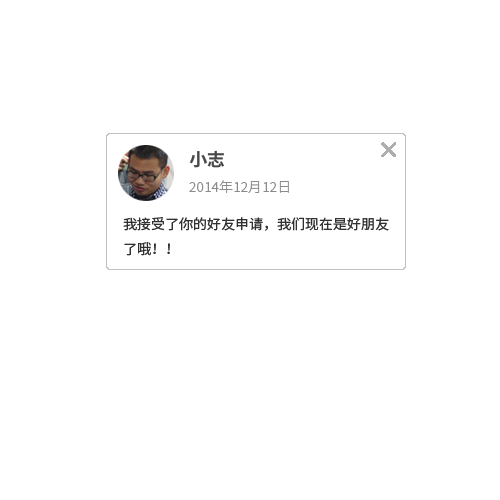
<style>
.page{position:relative;width:500px;height:500px;background:#ffffff}
.page>*{position:absolute;margin:0}
.t1{font:17.6px "NotoSansCJKsc-Bold";color:#484848}
.t2{font:13.7px "NotoSansCJKsc-Light";color:#8b8b8b}
.t3{font:13.7px "NotoSansCJKsc-Regular";color:#313131}
</style>
<div class="page">
<p class="t1" style="left:189px;top:150px;width:35px;height:18px">小志</p>
<p class="t2" style="left:189px;top:180px;width:100px;height:14px">2014年12月12日</p>
<p class="t3" style="left:123px;top:217px;width:266px;height:39px">我接受了你的好友申请，我们现在是好朋友<br>了哦！！</p>
</div>
